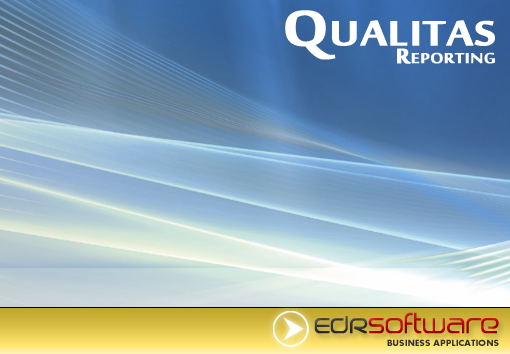
<style>
.page{position:relative;width:510px;height:354px}
.page>*{position:absolute;margin:0}
.t1{font:31.8px/18px "MoolBoran";color:#ffffff;font-variant:small-caps;font-weight:bold;scale:1.17 1}
.t2{font:76.3px/0px "MoolBoran";color:#ffffff;font-variant:small-caps;font-weight:bold;scale:1.17 1}
.t3{font:25.8px "Birdman";color:#be0000}
.t4{font:25.8px "Birdman";color:#333333}
.t5{font:9.4px "Aharoni-Bold";color:#333333;text-transform:uppercase}
</style>
<div class="page">
<p class="t1" style="left:285px;top:10px;width:210px;height:54px;text-align:right"><span class="t2">Qualitas<br></span>Reporting</p>
<p class="t3" style="left:314px;top:312px;width:185px;height:22px"><span class="t4">EDR</span>software</p>
<p class="t5" style="left:387px;top:339px;width:112px;height:7px">business applications</p>
</div>
